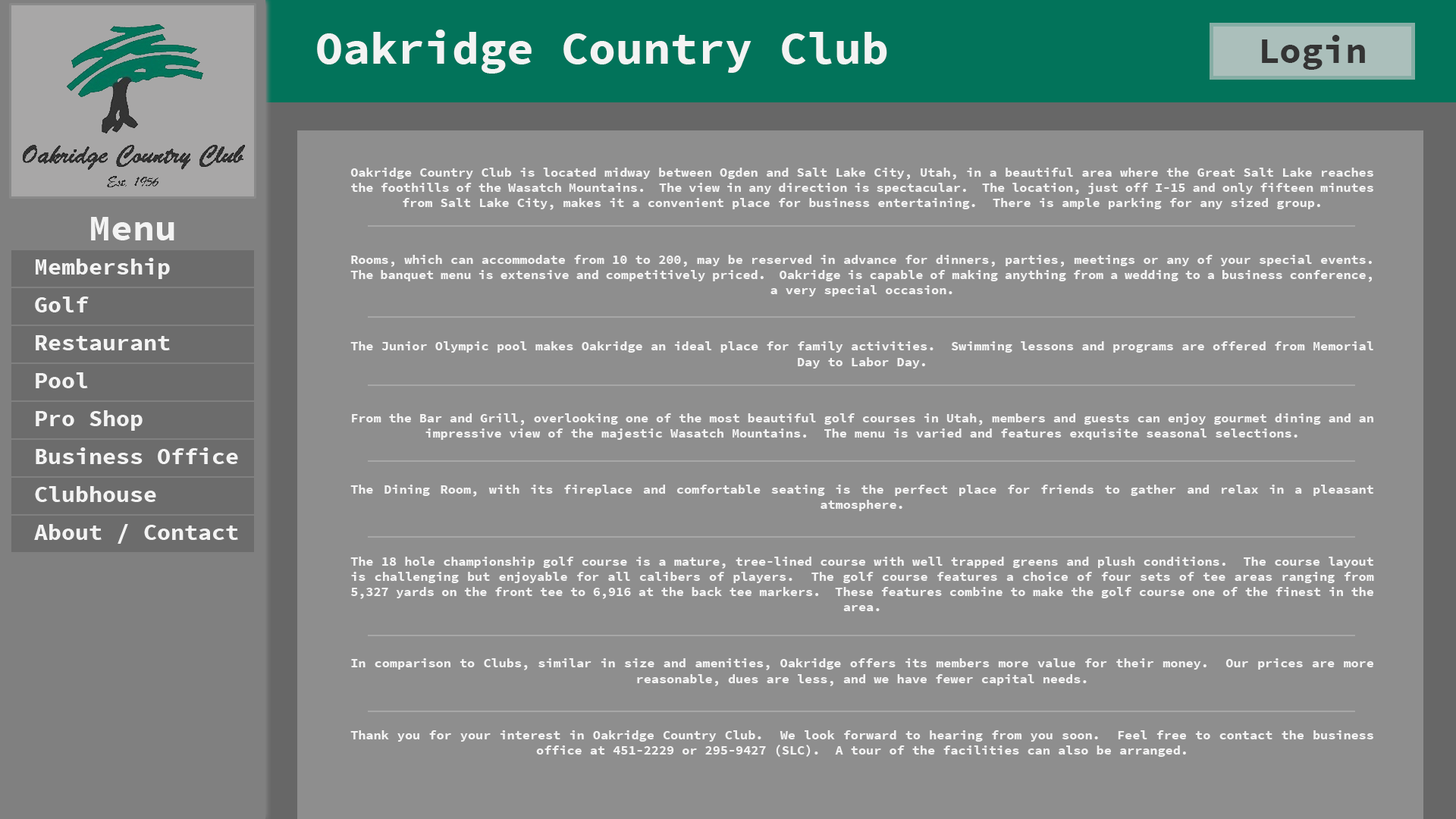
<style>
.page{position:relative;width:1456px;height:819px;background:#8e8e8e}
.page>*{position:absolute;margin:0}
.t1{font:45.5px "SourceCodePro-Bold";color:#f3f3f3}
.t2{font:36.4px "SourceCodePro-Bold";color:#343434}
.t3{font:12.8px "SourceCodePro-Bold";color:#f3f3f3}
.t4{font:36.4px "SourceCodePro-Bold";color:#f3f3f3}
.t5{font:22.7px "SourceCodePro-Bold";color:#f3f3f3}
</style>
<div class="page">
<p class="t1" style="left:317px;top:30px;width:570px;height:44px">Oakridge Country Club</p>
<p class="t2" style="left:1262px;top:35px;width:103px;height:35px">Login</p>
<p class="t3" style="left:350px;top:168px;width:1024px;height:589px;text-align:justify">Oakridge Country Club is located midway between Ogden and Salt Lake City, Utah, in a beautiful area where the Great Salt Lake reaches the foothills of the Wasatch Mountains.  The view in any direction is spectacular.  The location, just off I-15 and only fifteen minutes from Salt Lake City, makes it a convenient place for business entertaining.  There is ample parking for any sized group.<br> <br>Rooms, which can accommodate from 10 to 200, may be reserved in advance for dinners, parties, meetings or any of your special events.  The banquet menu is extensive and competitively priced.  Oakridge is capable of making anything from a wedding to a business conference, a very special occasion.<br> <br>The Junior Olympic pool makes Oakridge an ideal place for family activities.  Swimming lessons and programs are offered from Memorial Day to Labor Day.<br> <br>From the Bar and Grill, overlooking one of the most beautiful golf courses in Utah, members and guests can enjoy gourmet dining and an impressive view of the majestic Wasatch Mountains.  The menu is varied and features exquisite seasonal selections.<br> <br>The Dining Room, with its fireplace and comfortable seating is the perfect place for friends to gather and relax in a pleasant atmosphere.<br> <br>The 18 hole championship golf course is a mature, tree-lined course with well trapped greens and plush conditions.  The course layout is challenging but enjoyable for all calibers of players.  The golf course features a choice of four sets of tee areas ranging from 5,327 yards on the front tee to 6,916 at the back tee markers.  These features combine to make the golf course one of the finest in the area.<br> <br>In comparison to Clubs, similar in size and amenities, Oakridge offers its members more value for their money.  Our prices are more reasonable, dues are less, and we have fewer capital needs.<br> <br>Thank you for your interest in Oakridge Country Club.  We look forward to hearing from you soon.  Feel free to contact the business office at 451-2229 or 295-9427 (SLC).  A tour of the facilities can also be arranged.</p>
<p class="t4" style="left:91px;top:217px;width:83px;height:23px">Menu</p>
<p class="t5" style="left:36px;top:258px;width:134px;height:21px">Membership</p>
<p class="t5" style="left:35px;top:297px;width:54px;height:15px">Golf</p>
<p class="t5" style="left:36px;top:335px;width:134px;height:15px">Restaurant</p>
<p class="t5" style="left:36px;top:372px;width:52px;height:16px">Pool</p>
<p class="t5" style="left:36px;top:410px;width:107px;height:21px">Pro Shop</p>
<p class="t5" style="left:36px;top:447px;width:202px;height:17px">Business Office</p>
<p class="t5" style="left:35px;top:486px;width:121px;height:16px">Clubhouse</p>
<p class="t5" style="left:34px;top:524px;width:204px;height:20px">About / Contact</p>
</div>
